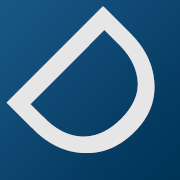
<style>
.page{position:relative;width:180px;height:180px}
.page>*{position:absolute;margin:0}
.t1{font:180px "MicrosoftYaHei";letter-spacing:0.085em;color:#e6e6e6}
</style>
<div class="page">
<p class="t1" style="left:6px;top:6px;width:149px;height:147px;rotate:45deg">D</p>
</div>
